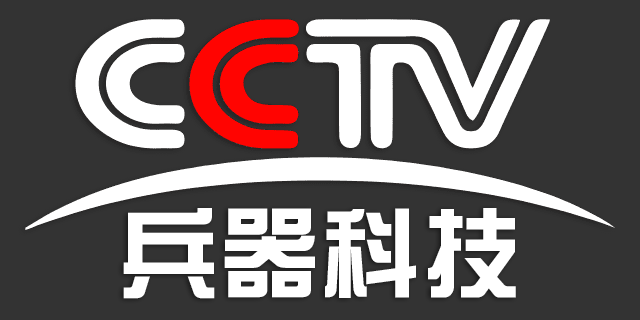
<style>
.page{position:relative;width:640px;height:320px;background:#333333}
.page>*{position:absolute;margin:0}
.t1{font:100px "DFZongYi-Bd-80-Win-GB";letter-spacing:0.01em;color:#ffffff}
</style>
<div class="page">
<p class="t1" style="left:123px;top:208px;width:393px;height:91px">兵器科技</p>
</div>
